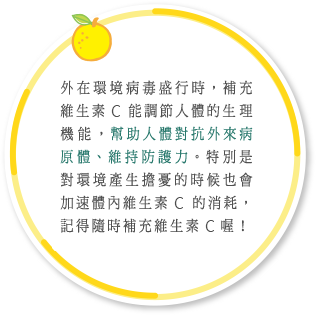
<style>
.page{position:relative;width:316px;height:315px;background:#ffffff}
.page>*{position:absolute;margin:0}
.t1{font:15px/23px "DFMingStd-W5";letter-spacing:0.2em;color:#505050;scale:0.87 1}
.t2{font:15px/23px "KannadaMN";letter-spacing:0.2em;color:#505050;scale:0.87 1}
.t3{font:15px/23px "DFMingStd-W5";letter-spacing:0.3em;color:#505050;scale:0.87 1}
.t4{font:15px/23px "DFMingStd-W5";letter-spacing:0.2em;color:#29796d;scale:0.87 1}
</style>
<div class="page">
<p class="t1" style="left:60px;top:80px;width:193px;height:153px;text-align:justify">外在環境病毒盛行時，補充維生素<span class="t2">C</span>能調節人體的<span class="t3">生理機能</span>，<span class="t4">幫助人體對抗外來病原體、維持防護力</span>。特別是對環境產生擔憂的時候也會加速體內維生素<span class="t2">C</span>的消耗，記得隨時補充維生素<span class="t2">C</span>喔！</p>
</div>
